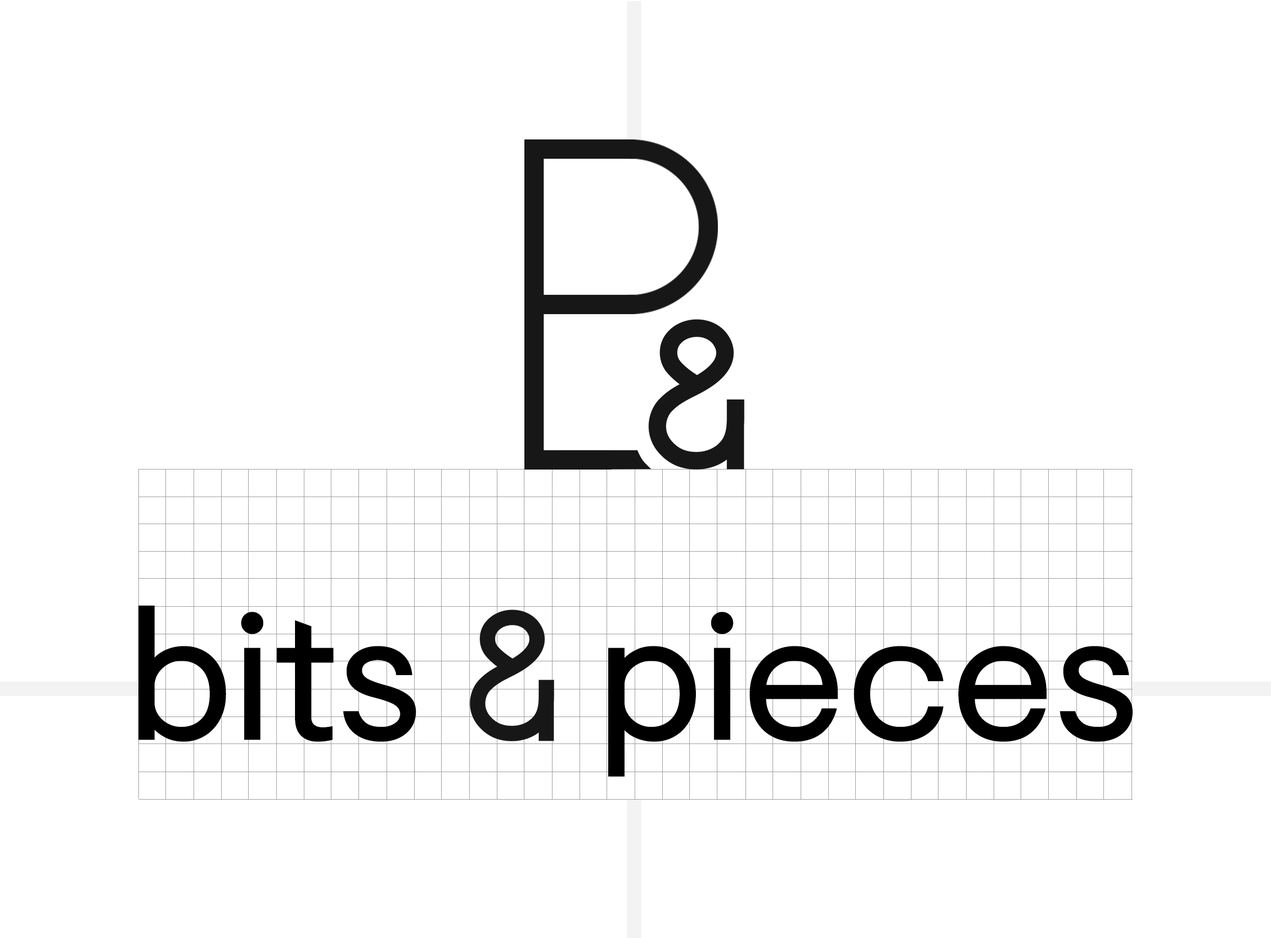
<style>
.page{position:relative;width:1271px;height:938px;background:#ffffff}
.page>*{position:absolute;margin:0}
.t1{font:183.8px "Visuelt-Regular";letter-spacing:0.006em;color:#000000}
</style>
<div class="page">
<p class="t1" style="left:138px;top:605px;width:278px;height:137px">bits</p>
<p class="t1" style="left:608px;top:612px;width:525px;height:165px">pieces</p>
</div>
